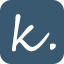
<style>
.page{position:relative;width:64px;height:64px;background:#395971}
.page>*{position:absolute;margin:0}
.t1{font:48px "SegoeScript";color:#ffffff}
</style>
<div class="page">
<p class="t1" style="left:12px;top:14px;width:44px;height:38px">k.</p>
</div>
